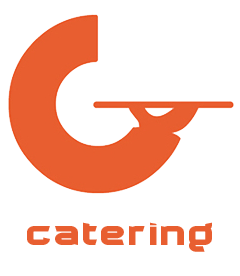
<style>
.page{position:relative;width:240px;height:276px;background:#ffffff}
.page>*{position:absolute;margin:0}
.t1{font:27.8px "CassiusGarrod";letter-spacing:0.1em;color:#e85e30;scale:1.2 1}
</style>
<div class="page">
<p class="t1" style="left:27px;top:222px;width:185px;height:30px">catering</p>
</div>
